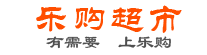
<style>
.page{position:relative;width:207px;height:55px;background:#ffffff}
.page>*{position:absolute;margin:0}
.t1{font:36px "STLiti";letter-spacing:0.05em;color:#ff4e00}
.t2{font:18px "LiSu";color:#4f4f4f}
</style>
<div class="page">
<p class="t1" style="left:36px;top:5px;width:146px;height:28px">乐购超市</p>
<p class="t2" style="left:46px;top:36px;width:125px;height:13px">有需要  上乐购</p>
</div>
